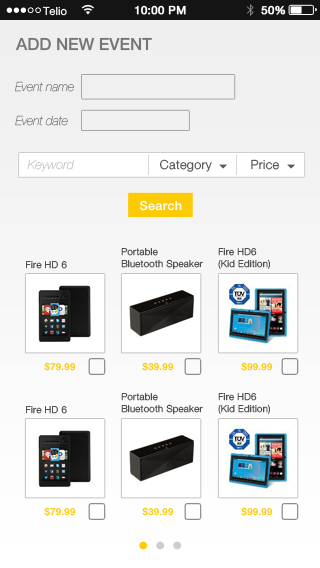
<style>
.page{position:relative;width:320px;height:568px}
.page>*{position:absolute;margin:0}
.t1{font:11.2px "HelveticaNeue";color:#ffffff}
.t2{font:11.2px "HelveticaNeue";letter-spacing:0.02em;color:#ffffff;font-weight:bold}
.t3{font:16.7px "HelveticaNeue-Medium";color:#757575;text-transform:uppercase}
.t4{font:12.5px "HelveticaNeue-UltraLightItalic";color:#757575}
.t5{font:12.5px "HelveticaNeue-UltraLightItalic";letter-spacing:0.03em;color:#bcbcbc}
.t6{font:12.5px "HelveticaNeue-Light";letter-spacing:0.03em;color:#4f4f4f}
.t7{font:12.5px "HelveticaNeue-Medium";letter-spacing:0.03em;color:#ffffff}
.t8{font:9.6px "HelveticaNeue-Light";letter-spacing:0.03em;color:#4f4f4f}
.t9{font:9.6px "HelveticaNeue-Medium";letter-spacing:0.03em;color:#fccb06}
</style>
<div class="page">
<p class="t1" style="left:42px;top:6px;width:25px;height:10px">Telio</p>
<p class="t2" style="left:134px;top:5px;width:52px;height:10px">10:00 PM</p>
<p class="t2" style="left:261px;top:5px;width:25px;height:10px">50%</p>
<p class="t3" style="left:16px;top:37px;width:136px;height:14px">Add new event</p>
<p class="t4" style="left:15px;top:81px;width:59px;height:11px">Event name</p>
<p class="t4" style="left:15px;top:115px;width:53px;height:11px">Event date</p>
<p class="t5" style="left:27px;top:159px;width:48px;height:13px">Keyword</p>
<p class="t6" style="left:160px;top:159px;width:52px;height:13px">Category</p>
<p class="t6" style="left:251px;top:159px;width:28px;height:11px">Price</p>
<p class="t7" style="left:139px;top:200px;width:43px;height:11px">Search</p>
<p class="t8" style="left:121px;top:248px;width:82px;height:21px">Portable<br>Bluetooth Speaker</p>
<p class="t8" style="left:218px;top:248px;width:52px;height:21px">Fire HD6<br>(Kid Edition)</p>
<p class="t8" style="left:26px;top:261px;width:41px;height:8px">Fire HD 6</p>
<p class="t9" style="left:44px;top:362px;width:32px;height:9px">$79.99</p>
<p class="t9" style="left:142px;top:362px;width:32px;height:9px">$39.99</p>
<p class="t9" style="left:241px;top:362px;width:32px;height:9px">$99.99</p>
<p class="t8" style="left:121px;top:393px;width:82px;height:21px">Portable<br>Bluetooth Speaker</p>
<p class="t8" style="left:218px;top:393px;width:52px;height:21px">Fire HD6<br>(Kid Edition)</p>
<p class="t8" style="left:26px;top:406px;width:41px;height:8px">Fire HD 6</p>
<p class="t9" style="left:44px;top:507px;width:32px;height:9px">$79.99</p>
<p class="t9" style="left:142px;top:507px;width:32px;height:9px">$39.99</p>
<p class="t9" style="left:241px;top:507px;width:32px;height:9px">$99.99</p>
</div>
